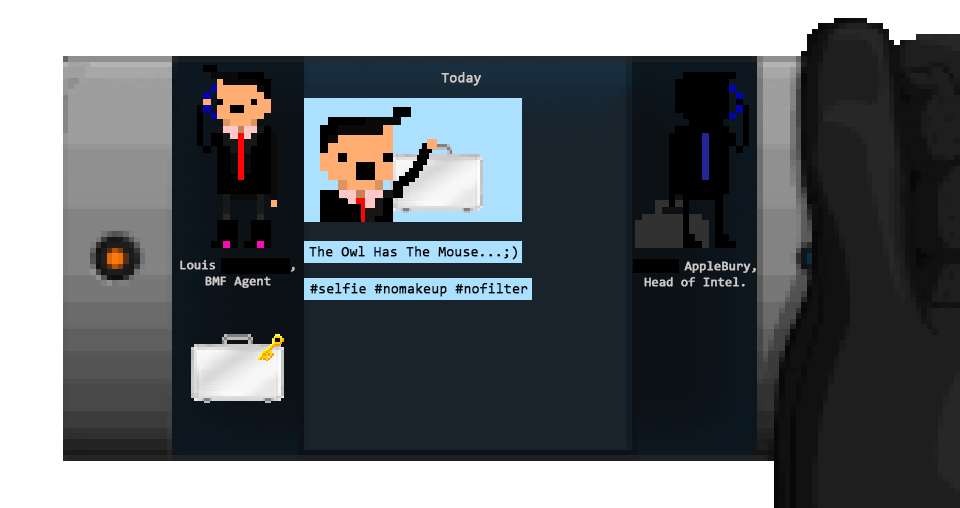
<style>
.page{position:relative;width:960px;height:508px;background:#ffffff}
.page>*{position:absolute;margin:0}
.t1{font:14px "Consolas";color:#cfcaca;font-weight:bold}
.t2{font:14px "Consolas";color:#000000;font-weight:bold}
.t3{font:12.8px "Consolas";font-weight:bold}
.t4{font:12.8px "Consolas";color:#cfcaca;font-weight:bold}
</style>
<div class="page">
<p class="t1" style="left:441px;top:72px;width:41px;height:14px">Today</p>
<p class="t2" style="left:309px;top:246px;width:209px;height:14px">The Owl Has The Mouse...;)</p>
<p class="t3" style="left:180px;top:260px;width:115px;height:28px;text-align:center">Louis AppleBury,<br>BMF Agent</p>
<p class="t4" style="left:634px;top:261px;width:122px;height:26px;text-align:center">Joness AppleBury,<br>Head of Intel.</p>
<p class="t2" style="left:310px;top:283px;width:218px;height:14px">#selfie #nomakeup #nofilter</p>
</div>
